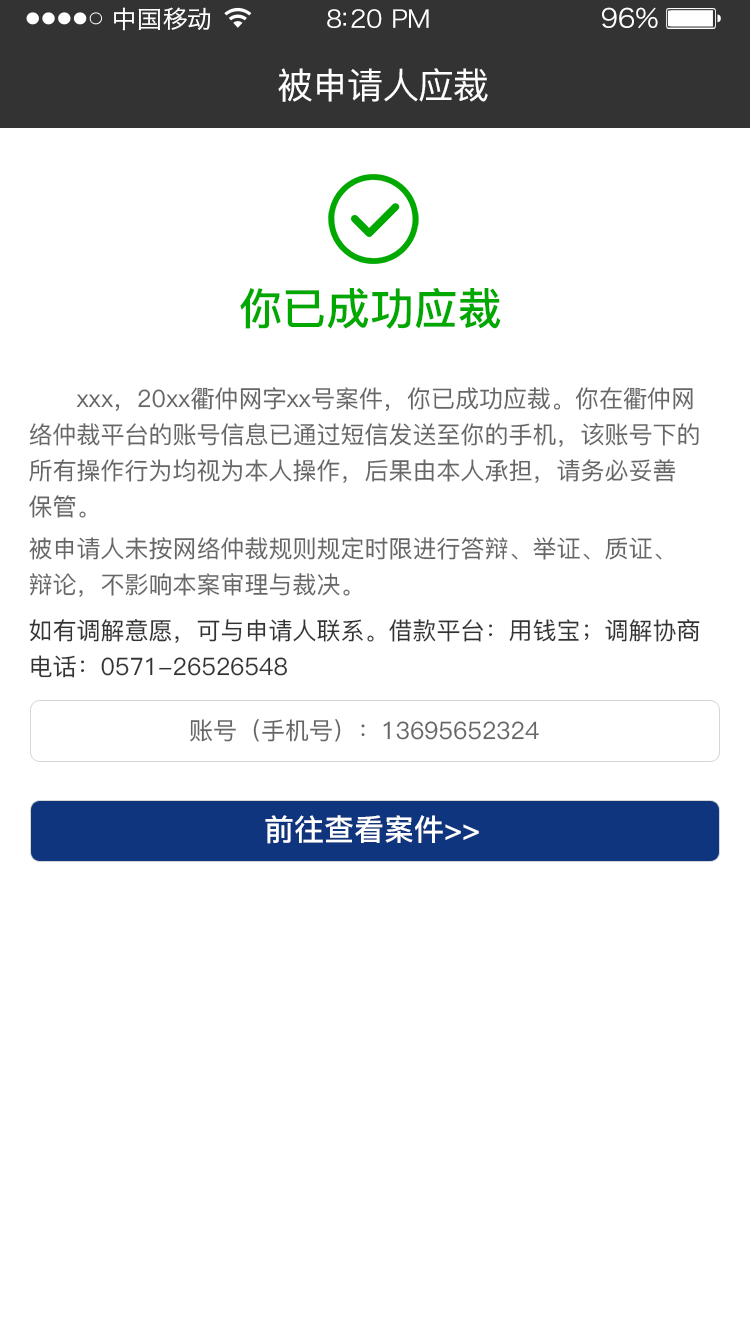
<style>
.page{position:relative;width:750px;height:1334px;background:#ffffff}
.page>*{position:absolute;margin:0}
.t1{font:24px "HiraginoSansGB-W3";letter-spacing:0.02em;color:#ffffff;scale:1.03 1}
.t2{font:24px "HiraginoSansGB-W3";letter-spacing:-0.02em;color:#ffffff;scale:1.03 1}
.t3{font:26.2px "HiraginoSansGB-W3";letter-spacing:-0.02em;color:#ffffff;scale:1.03 1}
.t4{font:36px "PingFang-SC-Medium";letter-spacing:-0.02em;color:#ffffff}
.t5{font:43.7px "PingFang-SC-Bold";color:#00a800}
.t6{font:24px/36px "PingFang-SC-Medium";color:#666666}
.t7{font:24px/36px "PingFang-SC-Medium";color:#333333}
.t8{font:24px "PingFang-SC-Medium";color:#666666}
.t9{font:30px "PingFang-SC-Bold";color:#ffffff}
</style>
<div class="page">
<p class="t1" style="left:114px;top:7px;width:97px;height:24px">中国移动</p>
<p class="t2" style="left:327px;top:9px;width:102px;height:19px">8:20 PM</p>
<p class="t3" style="left:602px;top:7px;width:56px;height:22px">96%</p>
<p class="t4" style="left:278px;top:68px;width:210px;height:34px">被申请人应裁</p>
<p class="t5" style="left:240px;top:288px;width:261px;height:41px">你已成功应裁</p>
<p class="t6" style="left:29px;top:387px;width:670px;height:131px">xxx，20xx衢仲网字xx号案件，你已成功应裁。你在衢仲网<br>络仲裁平台的账号信息已通过短信发送至你的手机，该账号下的<br>所有操作行为均视为本人操作，后果由本人承担，请务必妥善<br>保管。</p>
<p class="t6" style="left:29px;top:537px;width:633px;height:60px">被申请人未按网络仲裁规则规定时限进行答辩、举证、质证、<br>辩论，不影响本案审理与裁决。</p>
<p class="t7" style="left:29px;top:619px;width:671px;height:59px">如有调解意愿，可与申请人联系。借款平台：用钱宝；调解协商<br>电话：0571-26526548</p>
<p class="t8" style="left:190px;top:719px;width:349px;height:23px">账号（手机号）：13695652324</p>
<p class="t9" style="left:265px;top:815px;width:214px;height:29px">前往查看案件&gt;&gt;</p>
</div>
